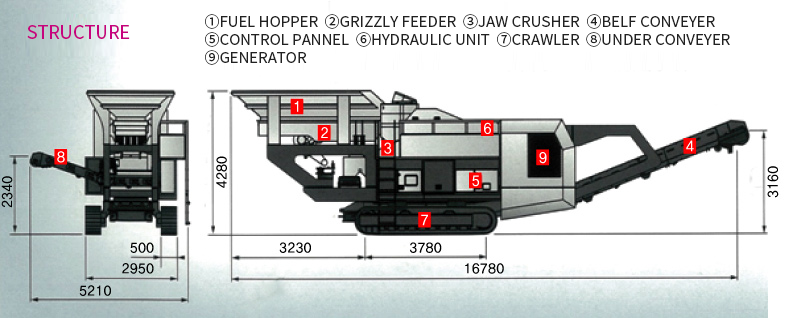
<style>
.page{position:relative;width:786px;height:318px;background:#ffffff}
.page>*{position:absolute;margin:0}
.t1{font:15px "NotoSansCJKkr-Regular";color:#212121;text-transform:uppercase}
.t2{font:18px "NotoSansCJKkr-Regular";color:#c6037d;text-transform:uppercase}
</style>
<div class="page">
<p class="t1" style="left:205px;top:14px;width:525px;height:51px">①Fuel Hopper  ②Grizzly Feeder  ③Jaw Crusher  ④Belf Conveyer<br>⑤Control Pannel  ⑥Hydraulic Unit  ⑦Crawler  ⑧Under Conveyer<br>⑨Generator</p>
<p class="t2" style="left:27px;top:25px;width:103px;height:14px">Structure</p>
</div>
